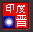
<style>
.page{position:relative;width:33px;height:32px;background:#f20000}
.page>*{position:absolute;margin:0}
.t1{font:10.4px "SimSun";color:#ffffff}
.t2{font:11.7px "SimSun";color:#ffffff}
</style>
<div class="page">
<p class="t1" style="left:6px;top:4px;width:19px;height:9px">印度</p>
<p class="t2" style="left:16px;top:15px;width:11px;height:12px">晋</p>
</div>
